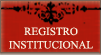
<style>
.page{position:relative;width:101px;height:55px}
.page>*{position:absolute;margin:0}
.t1{font:11px/13.4px "TimesNewRomanPSMT";color:#f5efde}
</style>
<div class="page">
<p class="t1" style="left:9px;top:27px;width:84px;height:22px;text-align:center">REGISTRO<br>INSTITUCIONAL</p>
</div>
